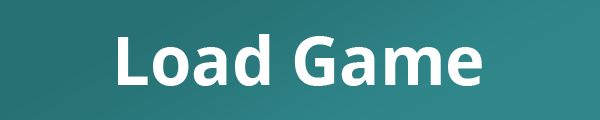
<style>
.page{position:relative;width:600px;height:120px}
.page>*{position:absolute;margin:0}
.t1{font:66.7px "NotoSans-Bold";color:#ffffff}
</style>
<div class="page">
<p class="t1" style="left:118px;top:34px;width:364px;height:52px">Load Game</p>
</div>
